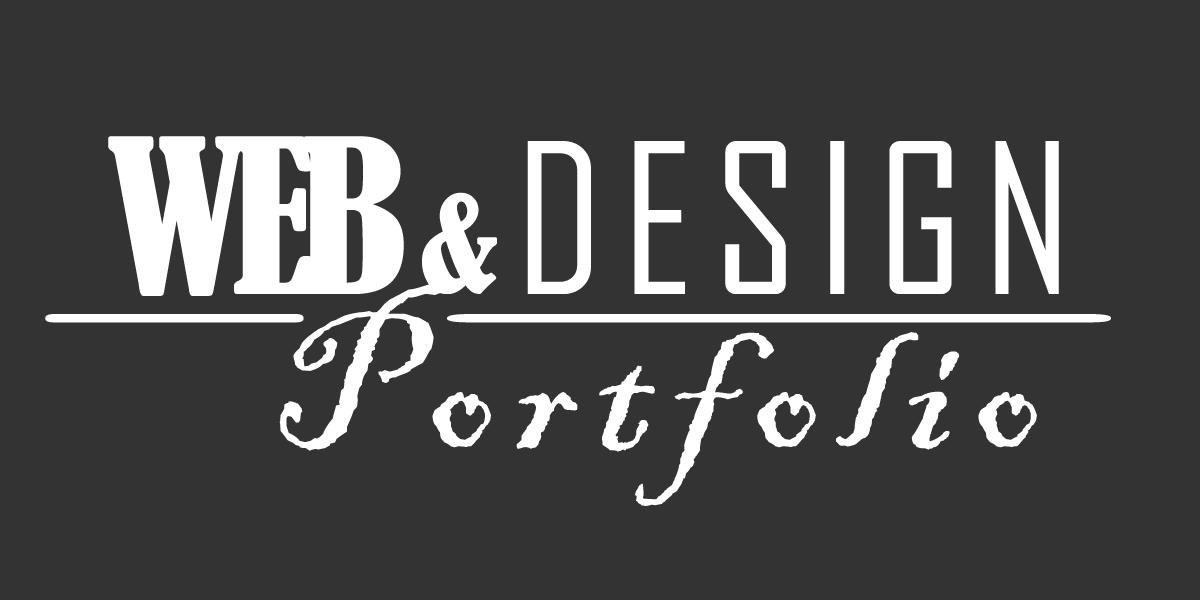
<style>
.page{position:relative;width:1200px;height:600px;background:#333333}
.page>*{position:absolute;margin:0}
.t1{font:200px "AgencyFB-Reg";letter-spacing:0.1em;color:#ffffff}
.t2{font:200px "BernardMT-Condensed";letter-spacing:-0.075em;color:#ffffff}
.t3{font:125px "BernardMT-Condensed";letter-spacing:-0.075em;color:#ffffff}
.t4{font:200px "BlackadderITC-Regular";letter-spacing:0.1em;color:#ffffff}
.t5{font:125px "Calibri";color:#ffffff;scale:4.1 1}
.t6{font:125px "Calibri";color:#ffffff;scale:10.55 1}
</style>
<div class="page">
<p class="t1" style="left:108px;top:136px;width:951px;height:160px"><span class="t2">WEB  </span><span class="t3">&amp;  </span>DESIGN</p>
<p class="t4" style="left:279px;top:281px;width:758px;height:225px">Portfolio</p>
<p class="t5" style="left:45px;top:314px;width:259px;height:9px">_</p>
<p class="t6" style="left:447px;top:314px;width:664px;height:9px">_</p>
</div>
